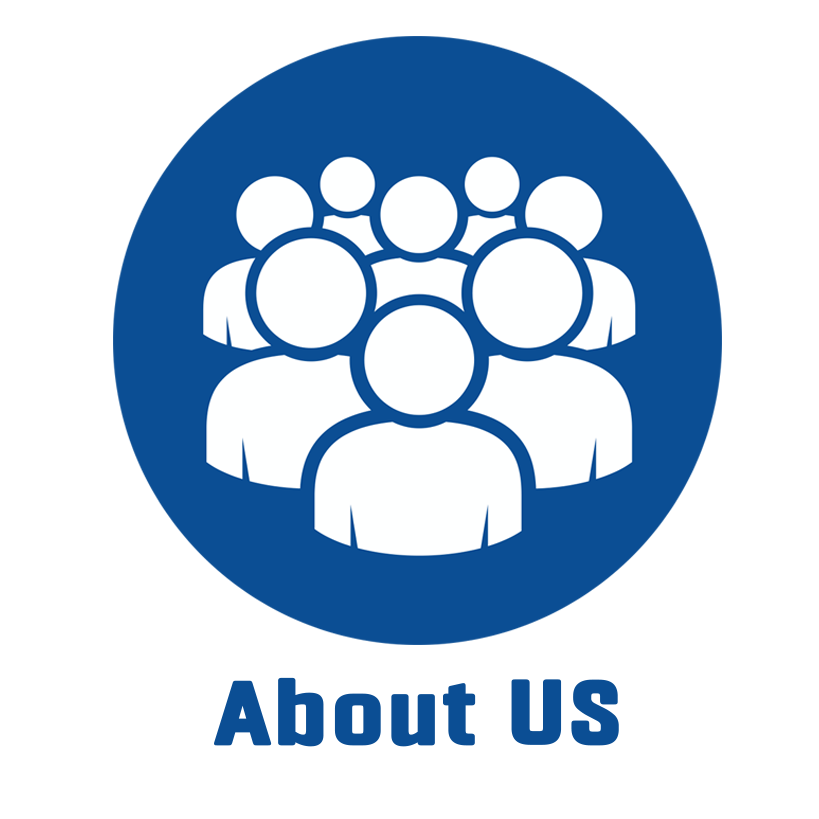
<style>
.page{position:relative;width:819px;height:819px;background:#ffffff}
.page>*{position:absolute;margin:0}
.t1{font:90.5px "Fragua-Bold";color:#0b4e94;font-weight:bold;scale:1.17 1}
</style>
<div class="page">
<p class="t1" style="left:214px;top:677px;width:405px;height:70px">About US</p>
</div>
